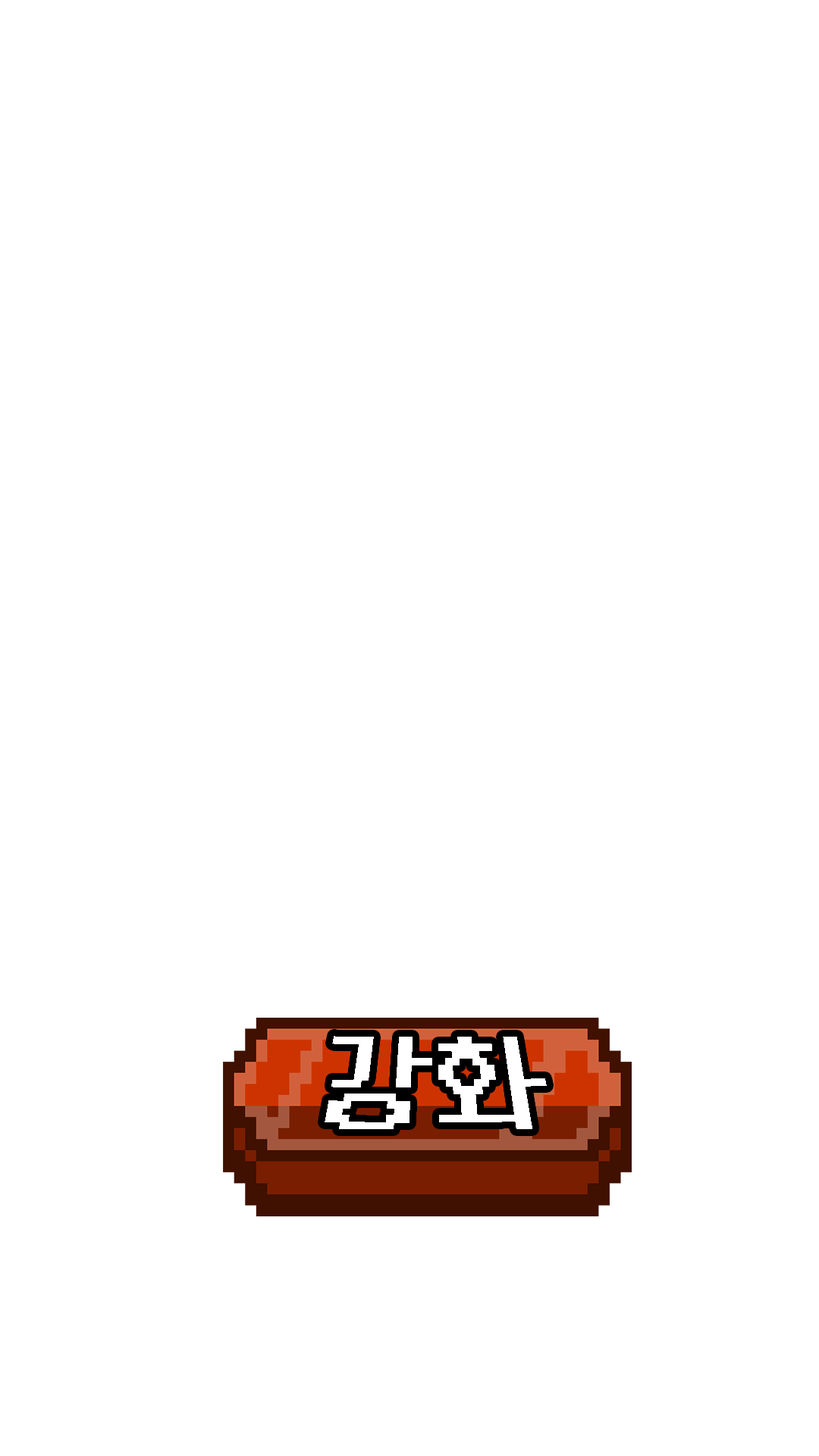
<style>
.page{position:relative;width:819px;height:1456px;background:#ffffff}
.page>*{position:absolute;margin:0}
.t1{font:113.7px "DungGeunMo";color:#ffffff}
</style>
<div class="page">
<p class="t1" style="left:325px;top:1036px;width:222px;height:93px">강화</p>
</div>
